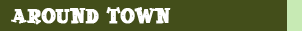
<style>
.page{position:relative;width:302px;height:31px;background:#434e1a}
.page>*{position:absolute;margin:0}
.t1{font:24px "SpaceOut";color:#ffffff;font-weight:bold}
</style>
<div class="page">
<p class="t1" style="left:11px;top:7px;width:160px;height:18px">Around town</p>
</div>
